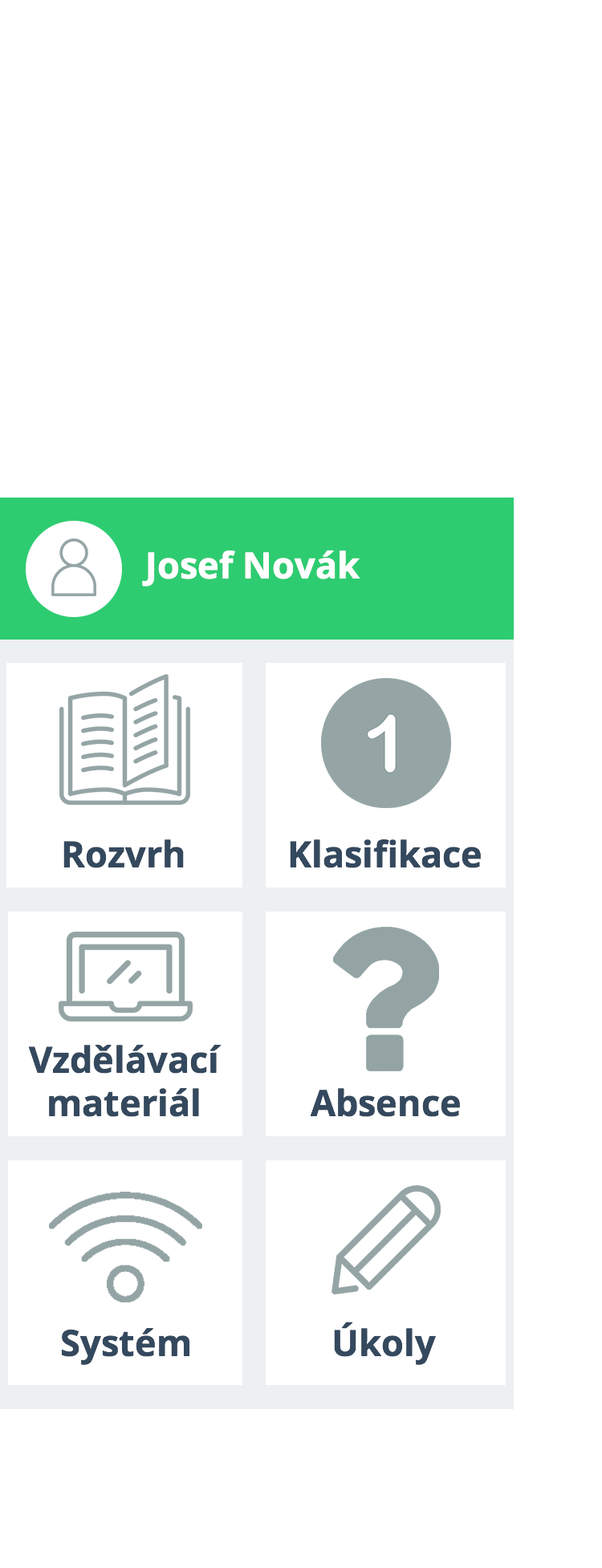
<style>
.page{position:relative;width:602px;height:1568px;background:#ffffff}
.page>*{position:absolute;margin:0}
.t1{font:36.1px "OpenSans-Bold";color:#ffffff}
.t2{font:36.1px "OpenSans-Bold";color:#34495e}
</style>
<div class="page">
<p class="t1" style="left:142px;top:550px;width:218px;height:37px">Josef Novák</p>
<p class="t2" style="left:63px;top:839px;width:121px;height:29px">Rozvrh</p>
<p class="t2" style="left:290px;top:839px;width:191px;height:29px">Klasifikace</p>
<p class="t2" style="left:28px;top:1044px;width:193px;height:73px;text-align:center">Vzdělávací<br>materiál</p>
<p class="t2" style="left:311px;top:1088px;width:149px;height:29px">Absence</p>
<p class="t2" style="left:334px;top:1322px;width:102px;height:43px">Úkoly</p>
<p class="t2" style="left:61px;top:1327px;width:129px;height:38px">Systém</p>
</div>
